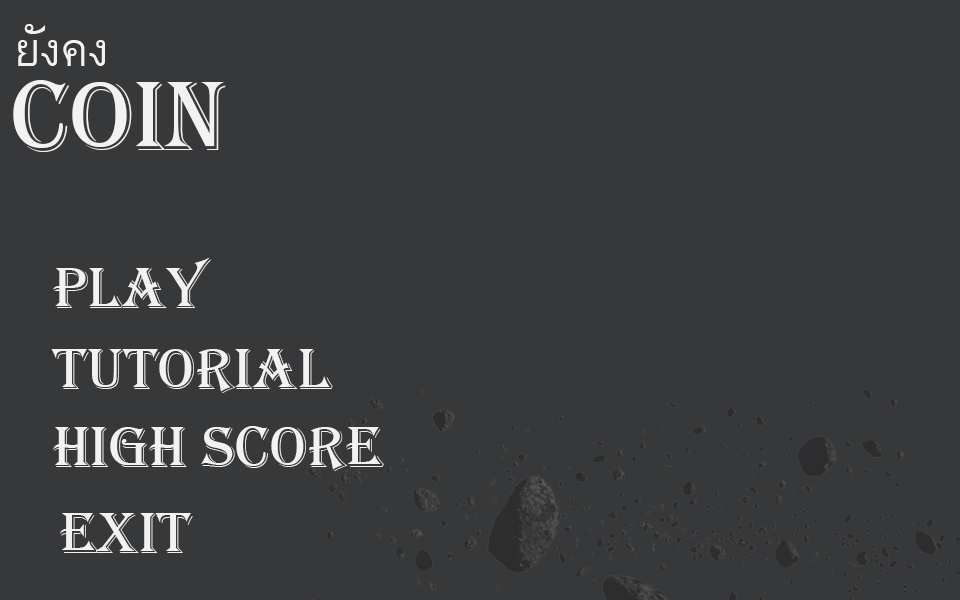
<style>
.page{position:relative;width:960px;height:600px;background:#37383a}
.page>*{position:absolute;margin:0}
.t1{font:64.7px "BrowalliaNew";color:#f4f1f1}
.t2{font:102.4px "Algerian";color:#f4f1f1}
.t3{font:60px "Algerian";color:#f4f1f1}
</style>
<div class="page">
<p class="t1" style="left:18px;top:24px;width:87px;height:42px">ยังคง</p>
<p class="t2" style="left:13px;top:80px;width:213px;height:72px">COIN</p>
<p class="t3" style="left:53px;top:257px;width:158px;height:51px">play</p>
<p class="t3" style="left:51px;top:349px;width:282px;height:44px">tutorial</p>
<p class="t3" style="left:53px;top:426px;width:331px;height:45px">high score</p>
<p class="t3" style="left:60px;top:513px;width:133px;height:40px">exit</p>
</div>
